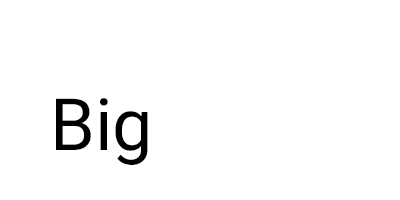
<style>
.page{position:relative;width:400px;height:200px;background:#ffffff}
.page>*{position:absolute;margin:0}
.t1{font:72px "Roboto-Regular";color:#000000}
</style>
<div class="page">
<p class="t1" style="left:56px;top:98px;width:92px;height:67px">Big</p>
</div>
